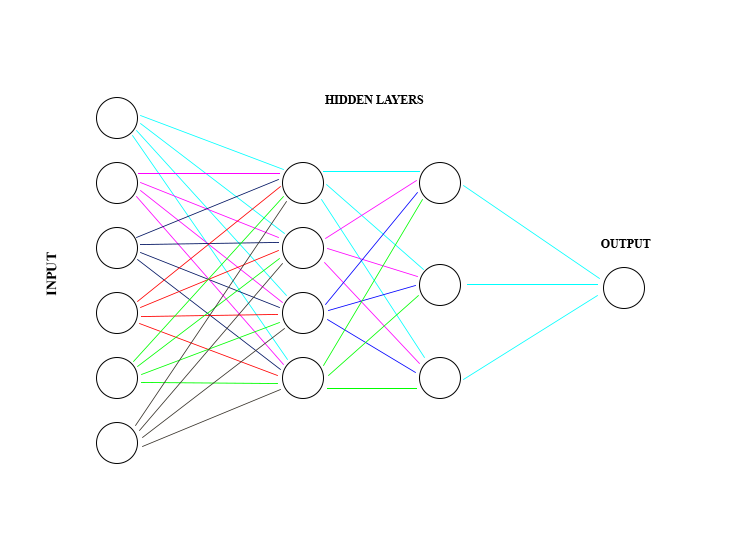
<style>
.page{position:relative;width:746px;height:559px;background:#ffffff}
.page>*{position:absolute;margin:0}
.t1{font:12px "TimesNewRomanPS-BoldMT";color:#000000}
.t2{font:14px "TimesNewRomanPS-BoldMT";color:#000000}
</style>
<div class="page">
<p class="t1" style="left:325px;top:95px;width:99px;height:9px">HIDDEN LAYERS</p>
<p class="t1" style="left:601px;top:239px;width:50px;height:9px">OUTPUT</p>
<p class="t2" style="left:46px;top:252px;width:11px;height:44px;rotate:-90deg">INPUT</p>
</div>
